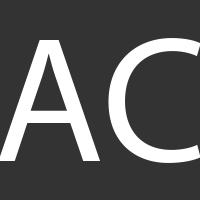
<style>
.page{position:relative;width:200px;height:200px;background:#333333}
.page>*{position:absolute;margin:0}
.t1{font:179.7px "MyriadPro-Regular";color:#ffffff}
</style>
<div class="page">
<p class="t1" style="left:0px;top:38px;width:201px;height:125px">AC</p>
</div>
